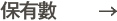
<style>
.page{position:relative;width:117px;height:21px;background:#ffffff}
.page>*{position:absolute;margin:0}
.t1{font:20px "GothicMB101Pr6N-Medium";letter-spacing:-0.075em;color:#4c4843}
</style>
<div class="page">
<p class="t1" style="left:0px;top:1px;width:57px;height:19px">保有數</p>
</div>
